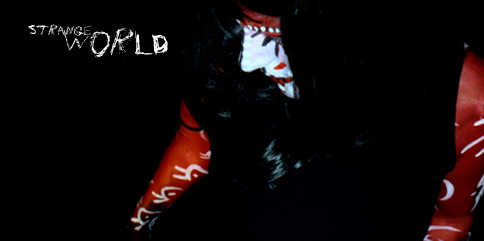
<style>
.page{position:relative;width:484px;height:241px;background:#000000}
.page>*{position:absolute;margin:0}
.t1{font:14px "NailScratch";letter-spacing:-0.01em;color:#ffffff}
.t2{font:36px "NailScratch";letter-spacing:-0.01em;color:#ffffff}
</style>
<div class="page">
<p class="t1" style="left:28px;top:24px;width:65px;height:12px">Strange</p>
<p class="t2" style="left:64px;top:28px;width:104px;height:30px">World</p>
</div>
